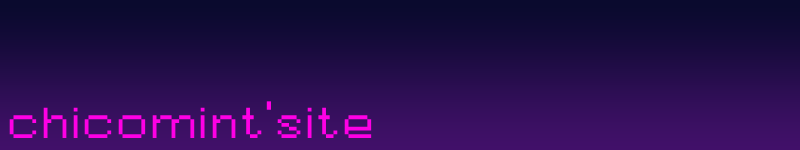
<style>
.page{position:relative;width:800px;height:150px}
.page>*{position:absolute;margin:0}
.t1{font:61px "TA8bit-Normal";color:#fe00e5}
</style>
<div class="page">
<p class="t1" style="left:9px;top:101px;width:363px;height:37px">chicomint'site</p>
</div>
